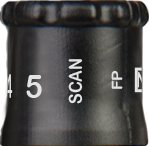
<style>
.page{position:relative;width:149px;height:146px}
.page>*{position:absolute;margin:0}
.t1{font:17.9px "ArialRoundedMTBold";letter-spacing:-0.01em;color:#e1e4e3;scale:0.89 1}
.t2{font:32.5px "ArialRoundedMTBold";letter-spacing:-0.01em;color:#e1e4e3;scale:0.36 1}
.t3{font:32.5px "ArialRoundedMTBold";letter-spacing:-0.01em;color:#e1e4e3;scale:0.93 1}
.t4{font:14.7px "ArialRoundedMTBold";letter-spacing:-0.01em;color:#e1e4e3;scale:1.09 1}
.t5{font:10.6px "ArialRoundedMTBold";letter-spacing:-0.01em;scale:2.7 1}
</style>
<div class="page">
<p class="t1" style="left:68px;top:59px;width:15px;height:45px;rotate:-90deg">SCAN</p>
<p class="t2" style="left:5px;top:74px;width:8px;height:24px">4</p>
<p class="t3" style="left:26px;top:75px;width:16px;height:23px">5</p>
<p class="t4" style="left:111px;top:70px;width:12px;height:19px;rotate:-90deg">FP</p>
<p class="t5" style="left:138px;top:70px;width:8px;height:19px;rotate:-90deg">Z</p>
</div>
